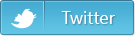
<style>
.page{position:relative;width:135px;height:36px}
.page>*{position:absolute;margin:0}
.t1{font:18px "SegoeUI";color:#ffffff}
</style>
<div class="page">
<p class="t1" style="left:61px;top:11px;width:54px;height:13px">Twitter</p>
</div>
